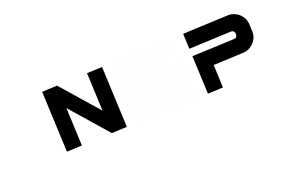
<style>
.page{position:relative;width:300px;height:170px;background:#ffffff}
.page>*{position:absolute;margin:0}
.t1{font:72px "NDLOGOS";color:#000000}
.t2{font:72px "NDLOGOS";color:#fefefe}
</style>
<div class="page">
<p class="t1" style="left:42px;top:14px;width:212px;height:138px;rotate:-23deg">n<span class="t2">E</span>P</p>
</div>
